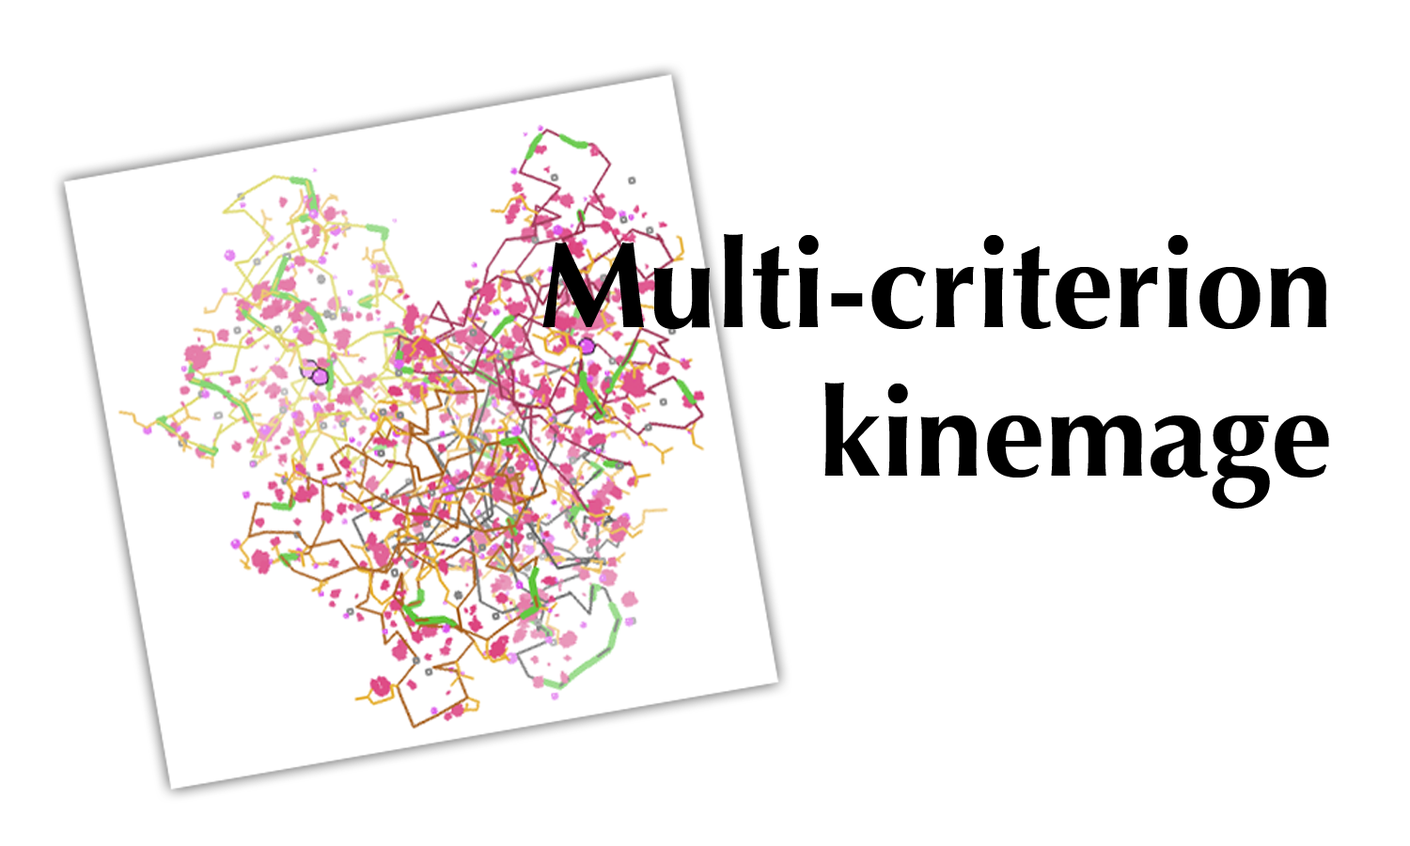
<style>
.page{position:relative;width:1410px;height:846px;background:#ffffff}
.page>*{position:absolute;margin:0}
.t1{font:123.2px "Optima-Bold";color:#000000}
</style>
<div class="page">
<p class="t1" style="left:542px;top:234px;width:787px;height:275px;text-align:right">Multi-criterion<br>kinemage</p>
</div>
